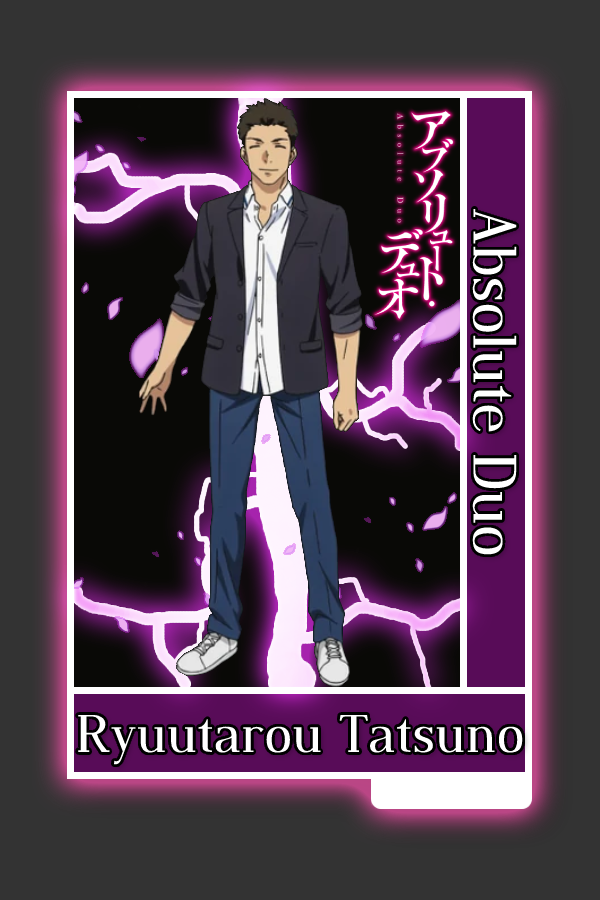
<style>
.page{position:relative;width:600px;height:900px;background:#333333}
.page>*{position:absolute;margin:0}
.t1{font:60px "DustismoRoman";color:#ffffff}
.t2{font:52px "DustismoRoman";color:#ffffff}
</style>
<div class="page">
<p class="t1" style="left:472px;top:208px;width:45px;height:347px;rotate:90deg">Absolute Duo</p>
<p class="t2" style="left:78px;top:714px;width:445px;height:52px">Ryuutarou Tatsuno</p>
</div>
